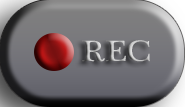
<style>
.page{position:relative;width:185px;height:107px}
.page>*{position:absolute;margin:0}
.t1{font:30px "PlantagenetCherokee";letter-spacing:-0.005em;scale:1.2 1}
</style>
<div class="page">
<p class="t1" style="left:82px;top:40px;width:68px;height:22px">REC</p>
</div>
